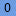
<style>
.page{position:relative;width:16px;height:16px}
.page>*{position:absolute;margin:0}
.t1{font:12px "MicrosoftNewTaiLue";color:#000000}
</style>
<div class="page">
<p class="t1" style="left:4px;top:3px;width:7px;height:9px">0</p>
</div>
